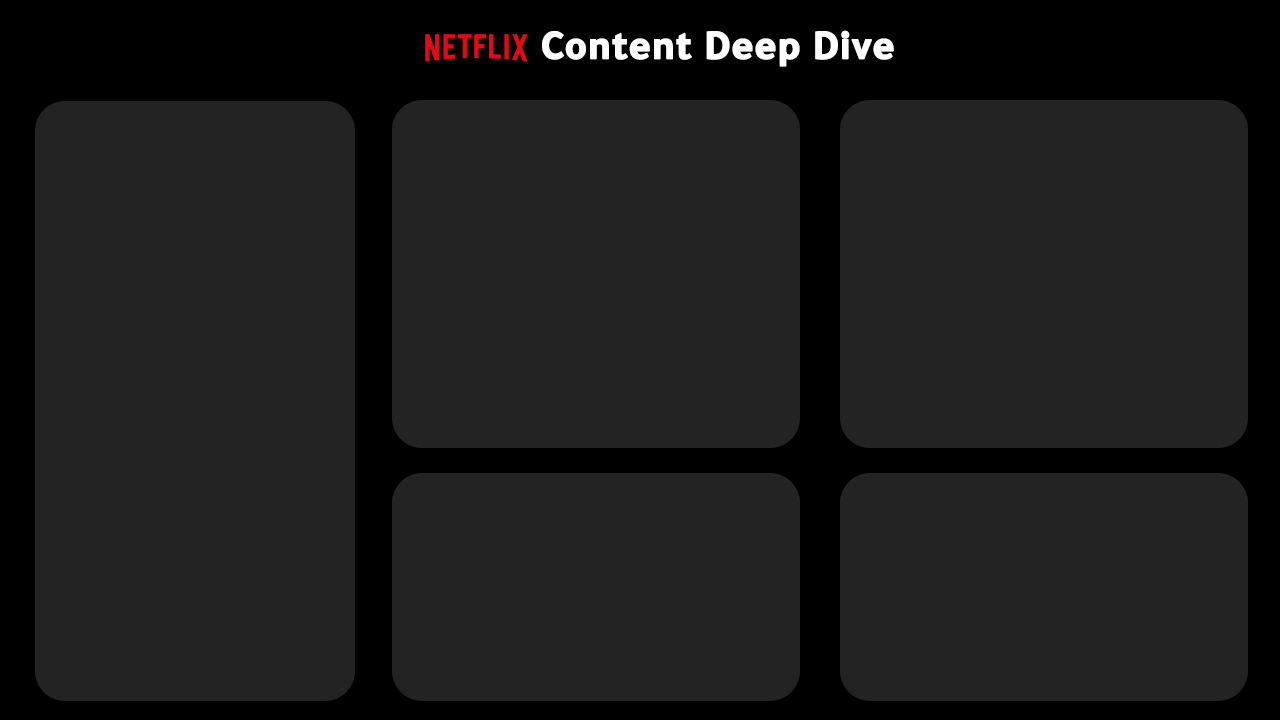
<style>
.page{position:relative;width:1280px;height:720px;background:#232323}
.page>*{position:absolute;margin:0}
.t1{font:41.7px "Tajawal-Bold";color:#ffffff;font-weight:bold}
</style>
<div class="page">
<p class="t1" style="left:542px;top:30px;width:352px;height:37px">Content Deep Dive</p>
</div>
